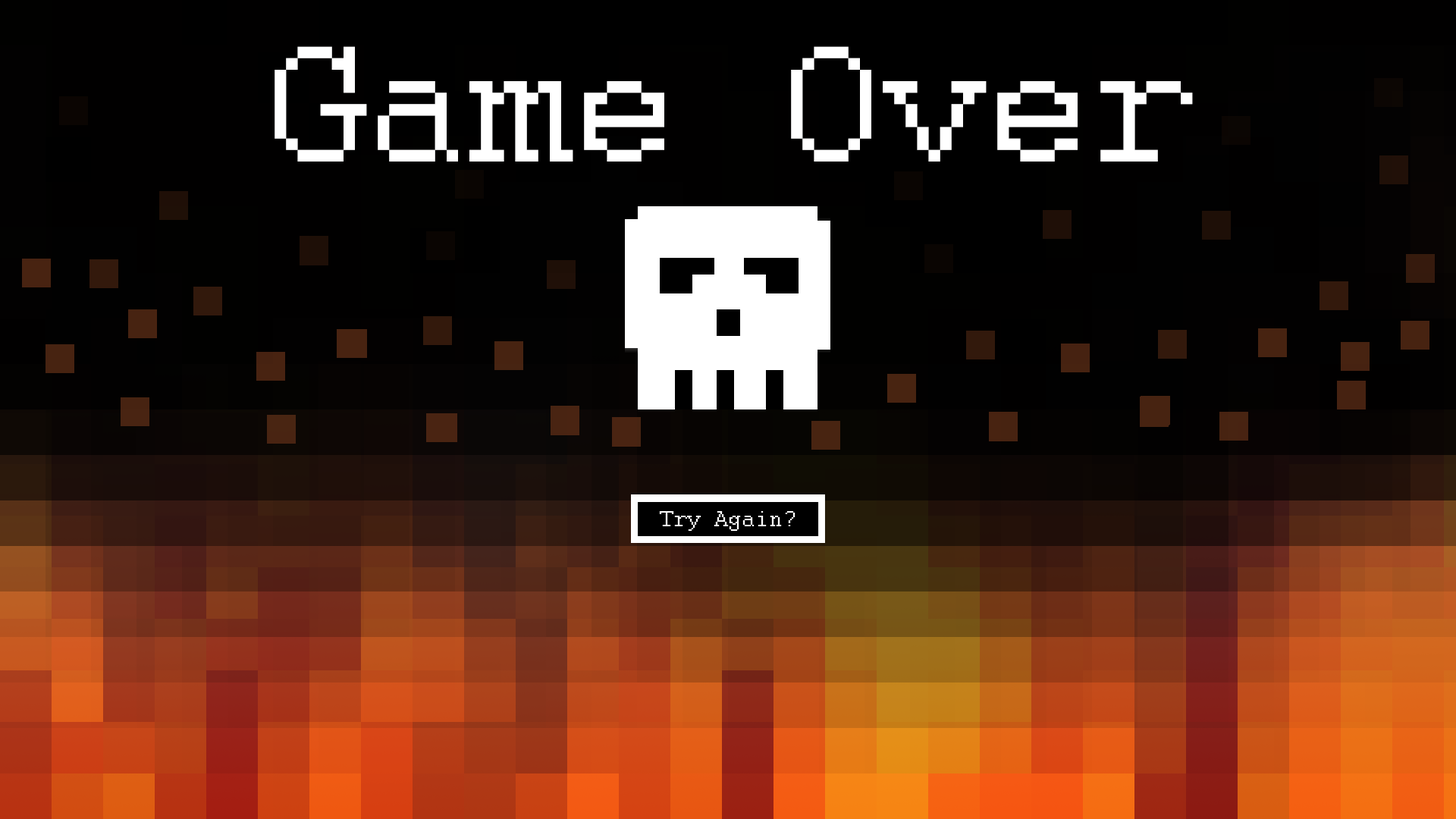
<style>
.page{position:relative;width:1456px;height:819px}
.page>*{position:absolute;margin:0}
.t1{font:183.5px "Courier";color:#ffffff}
</style>
<div class="page">
<p class="t1" style="left:275px;top:46px;width:918px;height:116px">Game Over</p>
</div>
